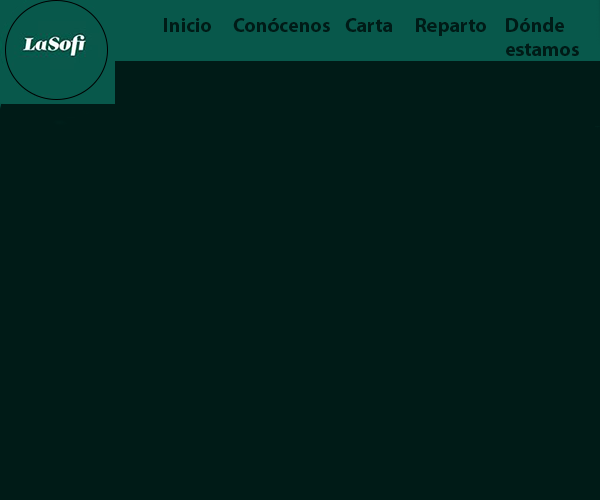
<style>
.page{position:relative;width:600px;height:500px;background:#001b17}
.page>*{position:absolute;margin:0}
.t1{font:20px "MyriadPro-Bold";color:#001b17}
</style>
<div class="page">
<p class="t1" style="left:506px;top:17px;width:73px;height:39px">Dónde <br>estamos</p>
<p class="t1" style="left:164px;top:18px;width:47px;height:14px">Inicio</p>
<p class="t1" style="left:233px;top:18px;width:97px;height:14px">Conócenos</p>
<p class="t1" style="left:345px;top:18px;width:47px;height:14px">Carta</p>
<p class="t1" style="left:416px;top:18px;width:70px;height:18px">Reparto</p>
</div>
